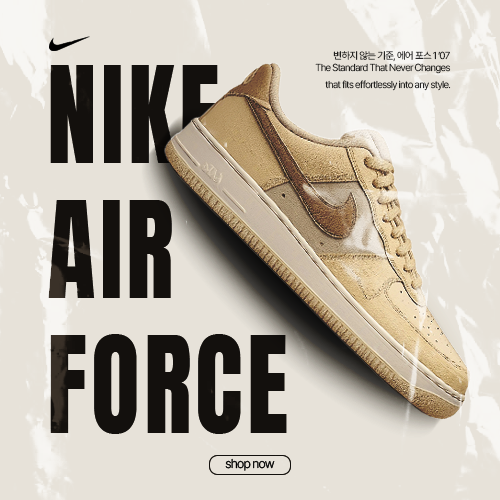
<style>
.page{position:relative;width:500px;height:500px;background:#e7e2d9}
.page>*{position:absolute;margin:0}
.t1{font:10px "Pretendard-Light";letter-spacing:-0.06em}
.t2{font:112.7px "Anton-Regular";letter-spacing:0.04em;color:#27211b;scale:0.89 1}
.t3{font:12.9px "Pretendard-Light";letter-spacing:-0.06em;color:#000000}
</style>
<div class="page">
<p class="t1" style="left:315px;top:51px;width:136px;height:23px;text-align:right">변하지 않는 기준, 에어 포스 1 ’07<br>The Standard That Never Changes</p>
<p class="t2" style="left:48px;top:65px;width:239px;height:369px">NIKE <br>AIR <br>FORCE</p>
<p class="t1" style="left:325px;top:80px;width:126px;height:11px">that fits effortlessly into any style.</p>
<p class="t3" style="left:225px;top:458px;width:50px;height:13px">shop now</p>
</div>
